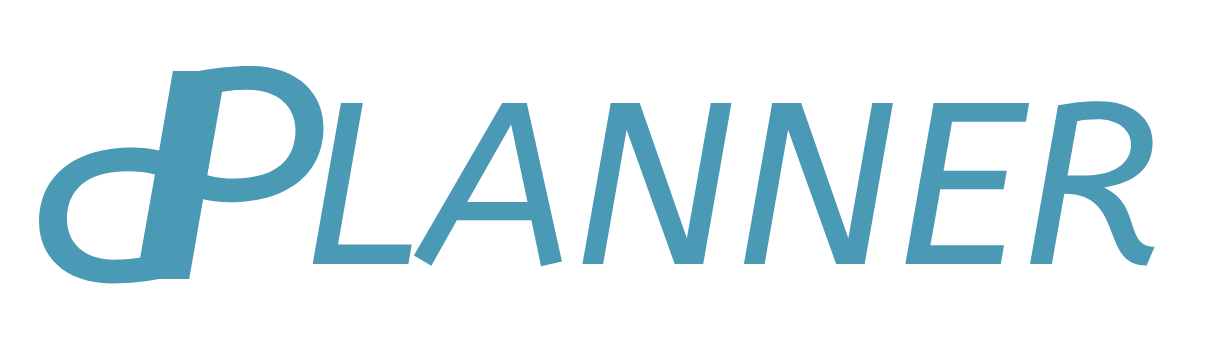
<style>
.page{position:relative;width:1214px;height:355px;background:#ffffff}
.page>*{position:absolute;margin:0}
.t1{font:301px "ABeeZee-Italic";color:#4a99b5}
.t2{font:300px "ABeeZee-Italic";color:#4a99b5}
.t3{font:230px "ABeeZee-Italic";color:#4a99b5}
</style>
<div class="page">
<p class="t1" style="left:160px;top:65px;width:164px;height:214px">P</p>
<p class="t2" style="left:39px;top:71px;width:163px;height:213px;rotate:180deg">P</p>
<p class="t3" style="left:312px;top:101px;width:843px;height:166px">LANNER</p>
</div>
